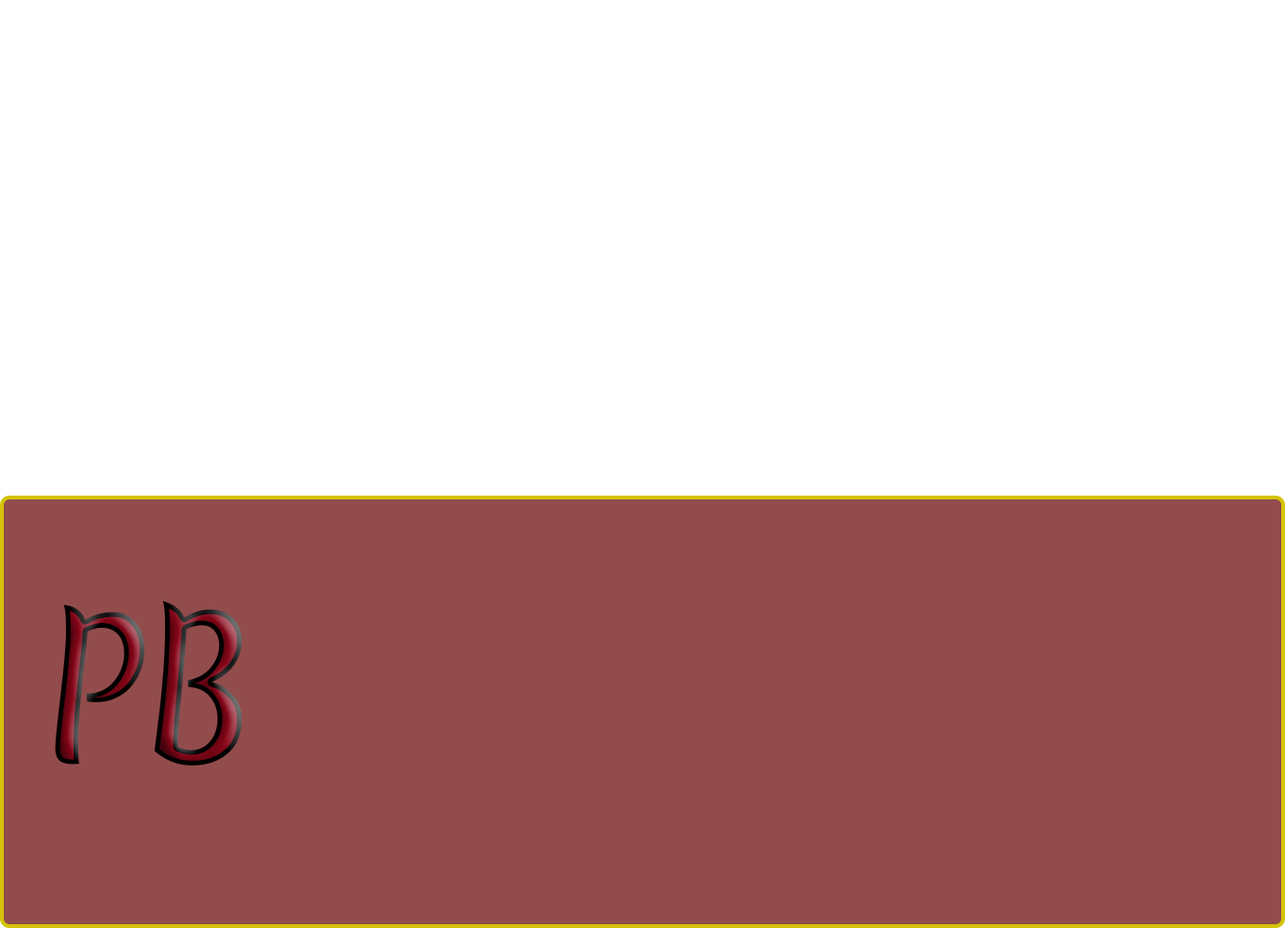
<style>
.page{position:relative;width:1285px;height:928px;background:#ffffff}
.page>*{position:absolute;margin:0}
.t1{font:188.7px "Merienda-Bold";scale:0.85 1}
</style>
<div class="page">
<p class="t1" style="left:55px;top:600px;width:188px;height:165px">PB</p>
</div>
